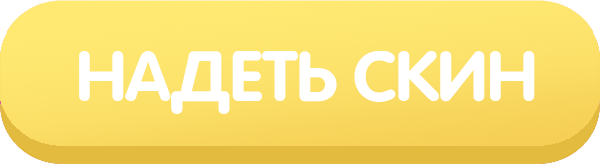
<style>
.page{position:relative;width:600px;height:164px}
.page>*{position:absolute;margin:0}
.t1{font:70.3px "Vag_Rounded-BoldCYRusbyme";color:#ffffff;scale:1.04 1}
</style>
<div class="page">
<p class="t1" style="left:79px;top:51px;width:456px;height:63px">НАДЕТЬ СКИН</p>
</div>
